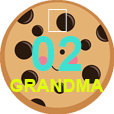
<style>
.page{position:relative;width:114px;height:114px;background:#e4b273}
.page>*{position:absolute;margin:0}
.t1{font:36px "Arial-BoldMT";color:#ffffff}
.t2{font:48px "Arial-BoldMT";color:#40e0d0}
.t3{font:18px "Arial-BoldMT";color:#deff00}
</style>
<div class="page">
<p class="t1" style="left:48px;top:9px;width:19px;height:23px">🍪</p>
<p class="t2" style="left:32px;top:36px;width:50px;height:35px">02</p>
<p class="t3" style="left:10px;top:79px;width:94px;height:13px">GRANDMA</p>
</div>
